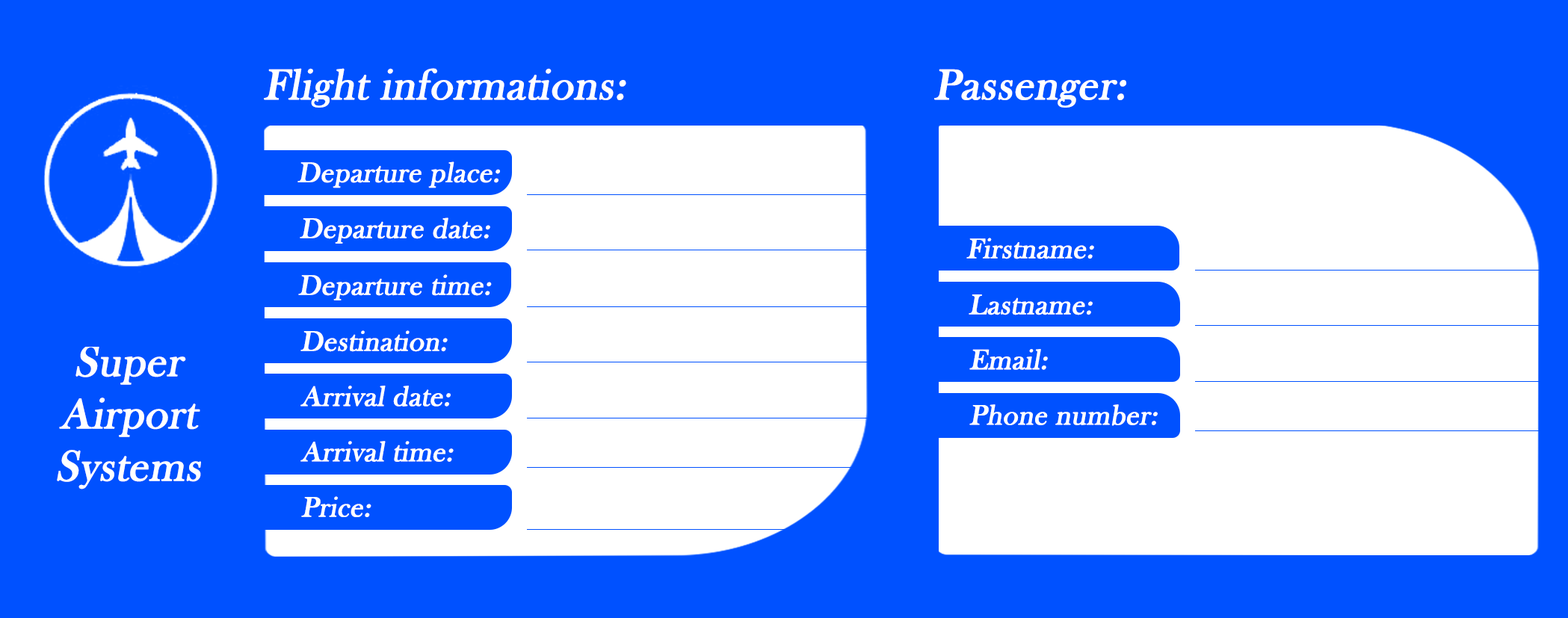
<style>
.page{position:relative;width:1568px;height:618px;background:#0051ff}
.page>*{position:absolute;margin:0}
.t1{font:28.5px "BaskOldFace";color:#ffffff;font-weight:bold;font-style:italic}
</style>
<div class="page">
<p class="t1" style="left:297px;top:161px;width:203px;height:27px">Departure place:</p>
<p class="t1" style="left:300px;top:217px;width:190px;height:27px">Departure date:</p>
<p class="t1" style="left:966px;top:238px;width:128px;height:21px">Firstname:</p>
<p class="t1" style="left:298px;top:274px;width:194px;height:26px">Departure time:</p>
<p class="t1" style="left:969px;top:294px;width:124px;height:21px">Lastname:</p>
<p class="t1" style="left:300px;top:330px;width:148px;height:22px">Destination:</p>
<p class="t1" style="left:969px;top:349px;width:79px;height:21px">Email:</p>
<p class="t1" style="left:300px;top:386px;width:151px;height:21px">Arrival date:</p>
<p class="t1" style="left:969px;top:404px;width:189px;height:22px">Phone number:</p>
<p class="t1" style="left:300px;top:441px;width:154px;height:21px">Arrival time:</p>
<p class="t1" style="left:301px;top:496px;width:70px;height:21px">Price:</p>
</div>
